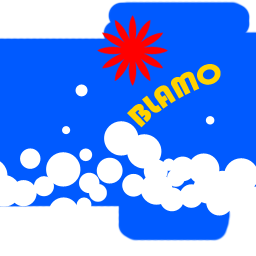
<style>
.page{position:relative;width:256px;height:256px;background:#005aff}
.page>*{position:absolute;margin:0}
.t1{font:30px "Bauhaus93";color:#ffd200}
</style>
<div class="page">
<p class="t1" style="left:127px;top:64px;width:94px;height:64px;rotate:-30deg">BLAMO</p>
</div>
